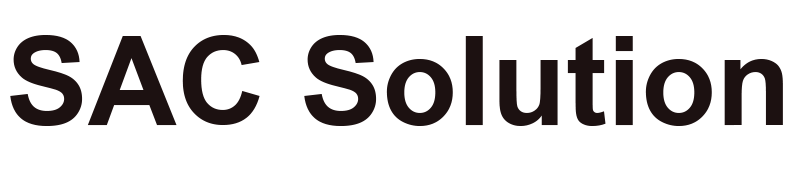
<style>
.page{position:relative;width:800px;height:173px;background:#ffffff}
.page>*{position:absolute;margin:0}
.t1{font:123.9px "Arial-BoldMT";color:#1c1111}
</style>
<div class="page">
<p class="t1" style="left:10px;top:35px;width:773px;height:91px">SAC Solution</p>
</div>
